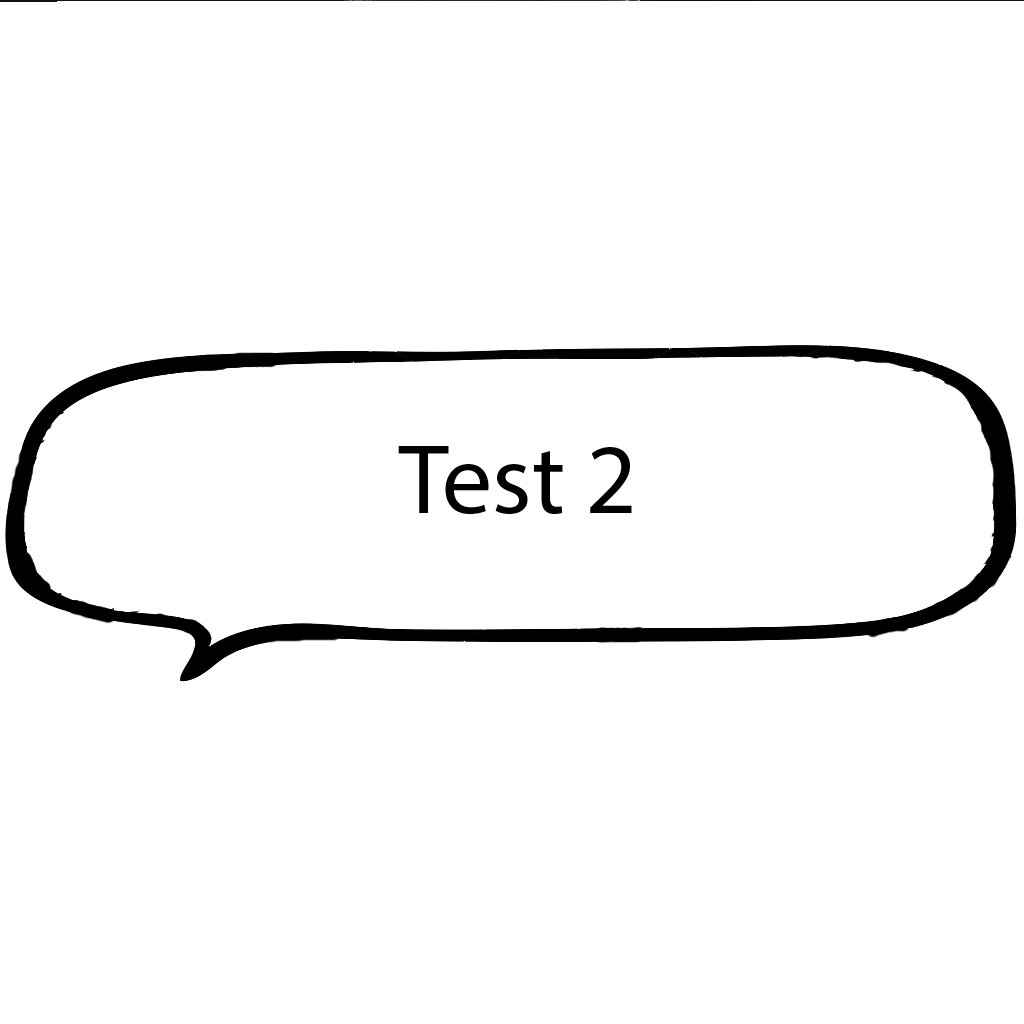
<style>
.page{position:relative;width:1024px;height:1024px;background:#ffffff}
.page>*{position:absolute;margin:0}
.t1{font:100px "MyriadPro-Regular";color:#000000}
</style>
<div class="page">
<p class="t1" style="left:398px;top:445px;width:234px;height:68px">Test 2</p>
</div>
